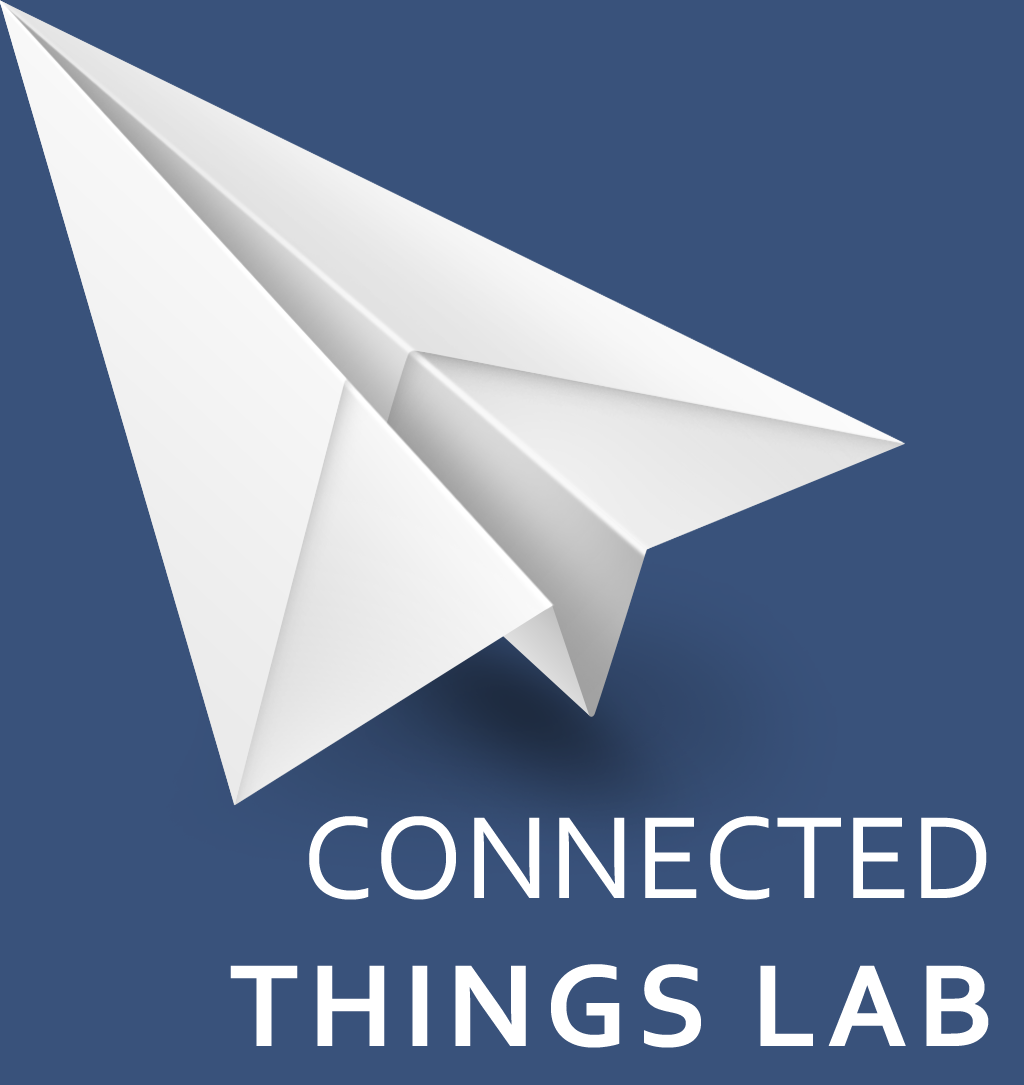
<style>
.page{position:relative;width:1024px;height:1085px;background:#39527b}
.page>*{position:absolute;margin:0}
.t1{font:122.8px "Corbel-Bold";letter-spacing:0.075em;color:#ffffff}
.t2{font:122.8px "Corbel";color:#ffffff}
</style>
<div class="page">
<p class="t1" style="left:230px;top:816px;width:759px;height:232px;text-align:right"><span class="t2"><br>CONNECTED<br></span>THINGS LAB</p>
</div>
